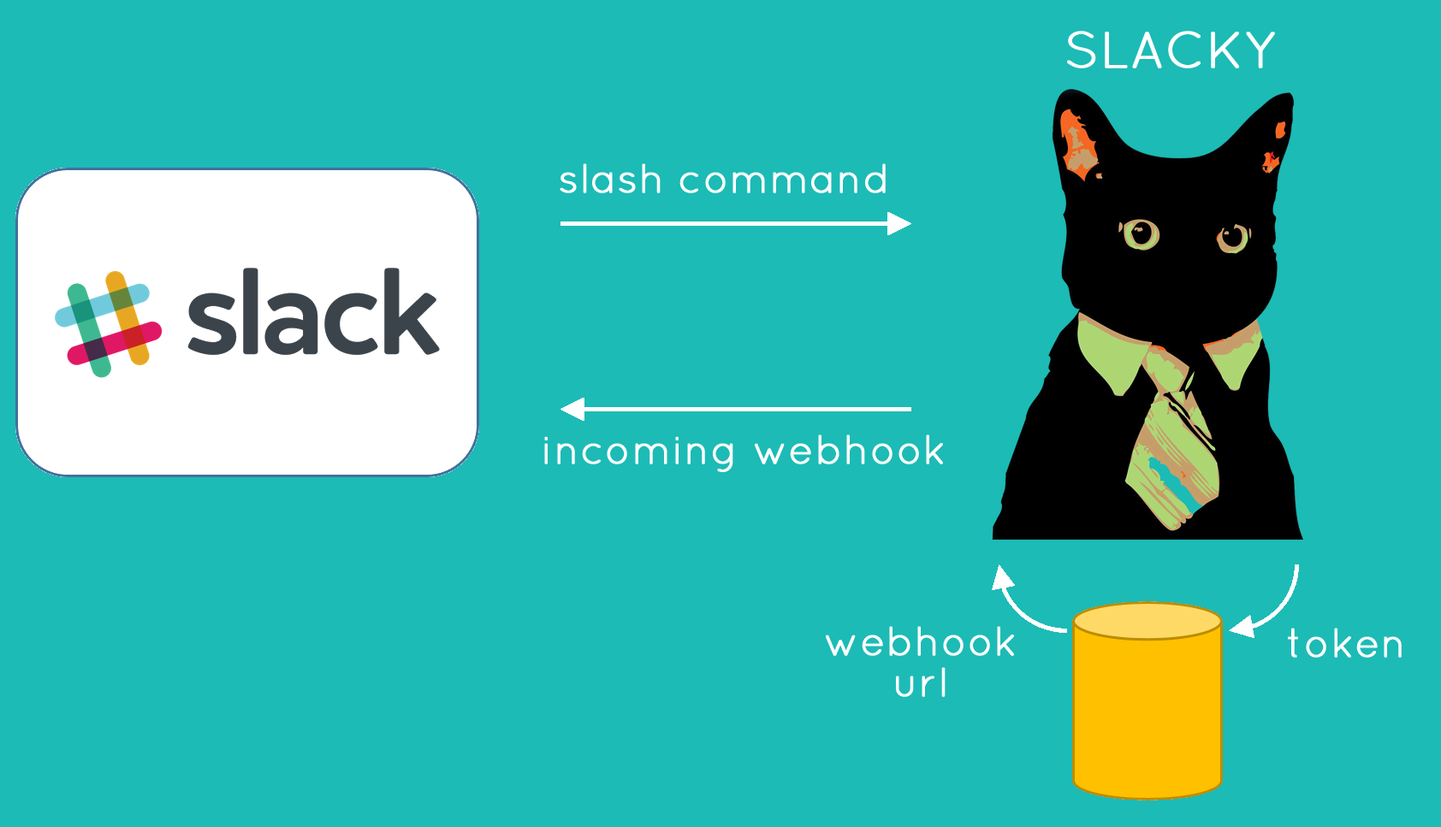
<style>
.page{position:relative;width:1441px;height:827px;background:#1cbbb6}
.page>*{position:absolute;margin:0}
.t1{font:51.3px "Quicksand-Regular";color:#ffffff;font-weight:bold}
.t2{font:41.1px "Quicksand-Regular";color:#ffffff;font-weight:bold}
.t3{font:41.1px "Quicksand-Regular";color:#fefefe;font-weight:bold}
.t4{font:41.1px/41.1px "Quicksand-Regular";color:#ffffff;font-weight:bold}
</style>
<div class="page">
<p class="t1" style="left:1067px;top:31px;width:208px;height:37px">SLACKY</p>
<p class="t2" style="left:560px;top:163px;width:326px;height:30px">slash command</p>
<p class="t3" style="left:544px;top:435px;width:399px;height:37px">incoming webhook</p>
<p class="t4" style="left:826px;top:626px;width:188px;height:71px;text-align:center">webhook<br>url</p>
<p class="t2" style="left:1288px;top:628px;width:114px;height:30px">token</p>
</div>
